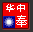
<style>
.page{position:relative;width:33px;height:32px;background:#f20000}
.page>*{position:absolute;margin:0}
.t1{font:10.4px "SimSun";color:#ffffff}
.t2{font:11.7px "SimSun";color:#ffffff}
</style>
<div class="page">
<p class="t1" style="left:6px;top:4px;width:19px;height:8px">华中</p>
<p class="t2" style="left:16px;top:15px;width:11px;height:12px">奉</p>
</div>
